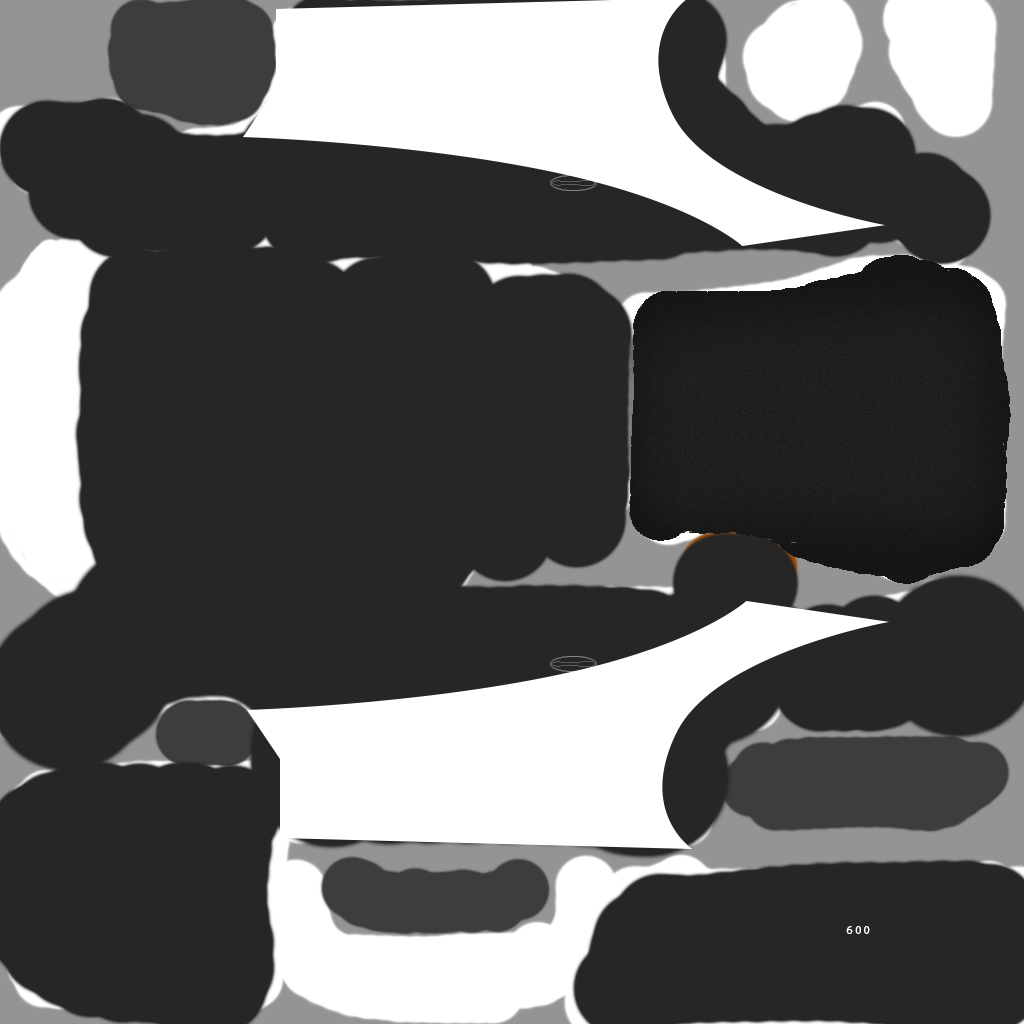
<style>
.page{position:relative;width:1024px;height:1024px;background:#262626}
.page>*{position:absolute;margin:0}
.t1{font:12px "MyriadPro-Regular";letter-spacing:0.2em;color:#ffffff}
</style>
<div class="page">
<p class="t1" style="left:846px;top:926px;width:24px;height:8px">600</p>
</div>
